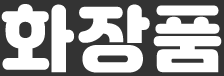
<style>
.page{position:relative;width:224px;height:76px;background:#ffffff}
.page>*{position:absolute;margin:0}
.t1{font:72px "Jalnan";letter-spacing:0.05em;color:#ffffff;text-transform:uppercase}
</style>
<div class="page">
<p class="t1" style="left:1px;top:4px;width:221px;height:69px">화장품</p>
</div>
